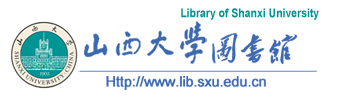
<style>
.page{position:relative;width:340px;height:110px;background:#ffffff}
.page>*{position:absolute;margin:0}
.t1{font:12.1px "Arial-BoldMT";color:#009494;scale:0.86 1}
.t2{font:28.3px "²ÝÌ´Õ«Ã«Ôó¶«×ÖÌå";color:#3c68af;font-weight:bold}
.t3{font:14.1px "Small Fonts";color:#3c68af;font-weight:bold}
</style>
<div class="page">
<p class="t1" style="left:181px;top:8px;width:138px;height:12px">Library of Shanxi University</p>
<p class="t2" style="left:212px;top:33px;width:85px;height:31px">图书馆</p>
<p class="t3" style="left:106px;top:76px;width:160px;height:14px">Http://www.lib.sxu.edu.cn</p>
</div>
